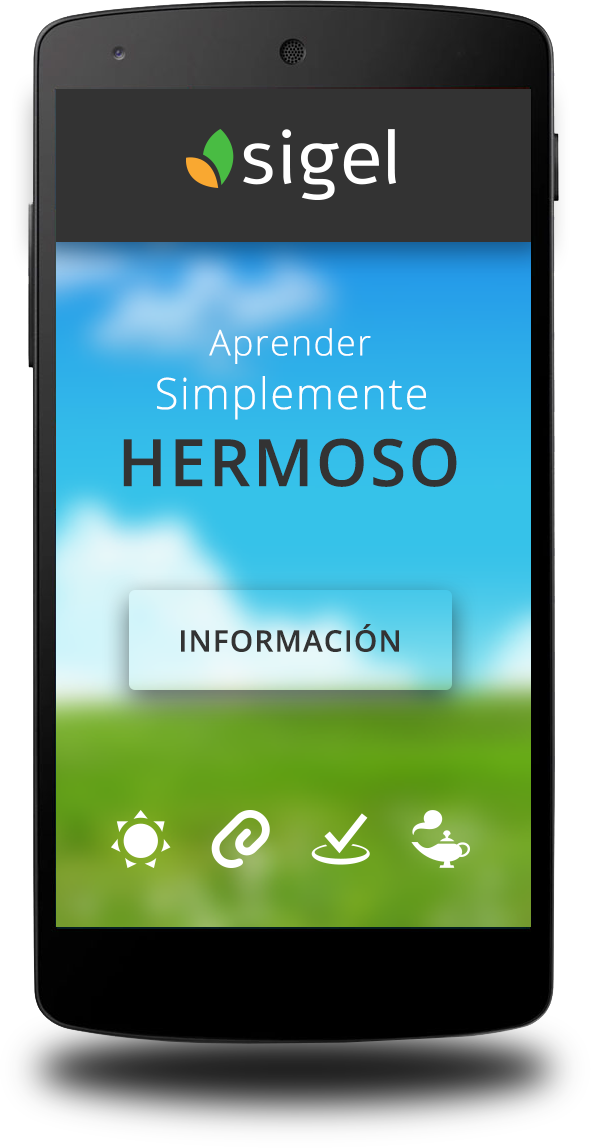
<style>
.page{position:relative;width:591px;height:1148px}
.page>*{position:absolute;margin:0}
.t1{font:35.7px "OpenSans-Light";letter-spacing:0.04em;color:#ffffff}
.t2{font:43.2px "OpenSans-Light";letter-spacing:0.04em;color:#ffffff}
.t3{font:65.4px "OpenSans-Semibold";letter-spacing:0.04em;color:#333333}
.t4{font:29.6px "OpenSans-Semibold";letter-spacing:0.04em;color:#333333}
</style>
<div class="page">
<p class="t1" style="left:209px;top:328px;width:162px;height:36px">Aprender</p>
<p class="t2" style="left:157px;top:376px;width:269px;height:44px">Simplemente</p>
<p class="t3" style="left:123px;top:438px;width:334px;height:49px">HERMOSO</p>
<p class="t4" style="left:181px;top:624px;width:218px;height:28px">INFORMACIÓN</p>
</div>
